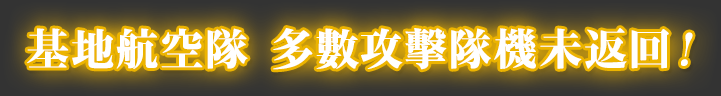
<style>
.page{position:relative;width:721px;height:96px}
.page>*{position:absolute;margin:0}
.t1{font:43px "KochoStd-Heavy";letter-spacing:0.005em;color:#ffffff;font-weight:bold}
.t2{font:43px "RyuminPro-Heavy";letter-spacing:0.005em;color:#ffffff;font-weight:bold}
.t3{font:43px "KochoStd-Heavy";letter-spacing:0.005em;color:#ffffff;font-weight:bold;font-style:italic}
</style>
<div class="page">
<p class="t1" style="left:27px;top:28px;width:666px;height:42px">基地航空隊 多數攻<span class="t2">擊</span>隊機未返回<span class="t3">！</span></p>
</div>
